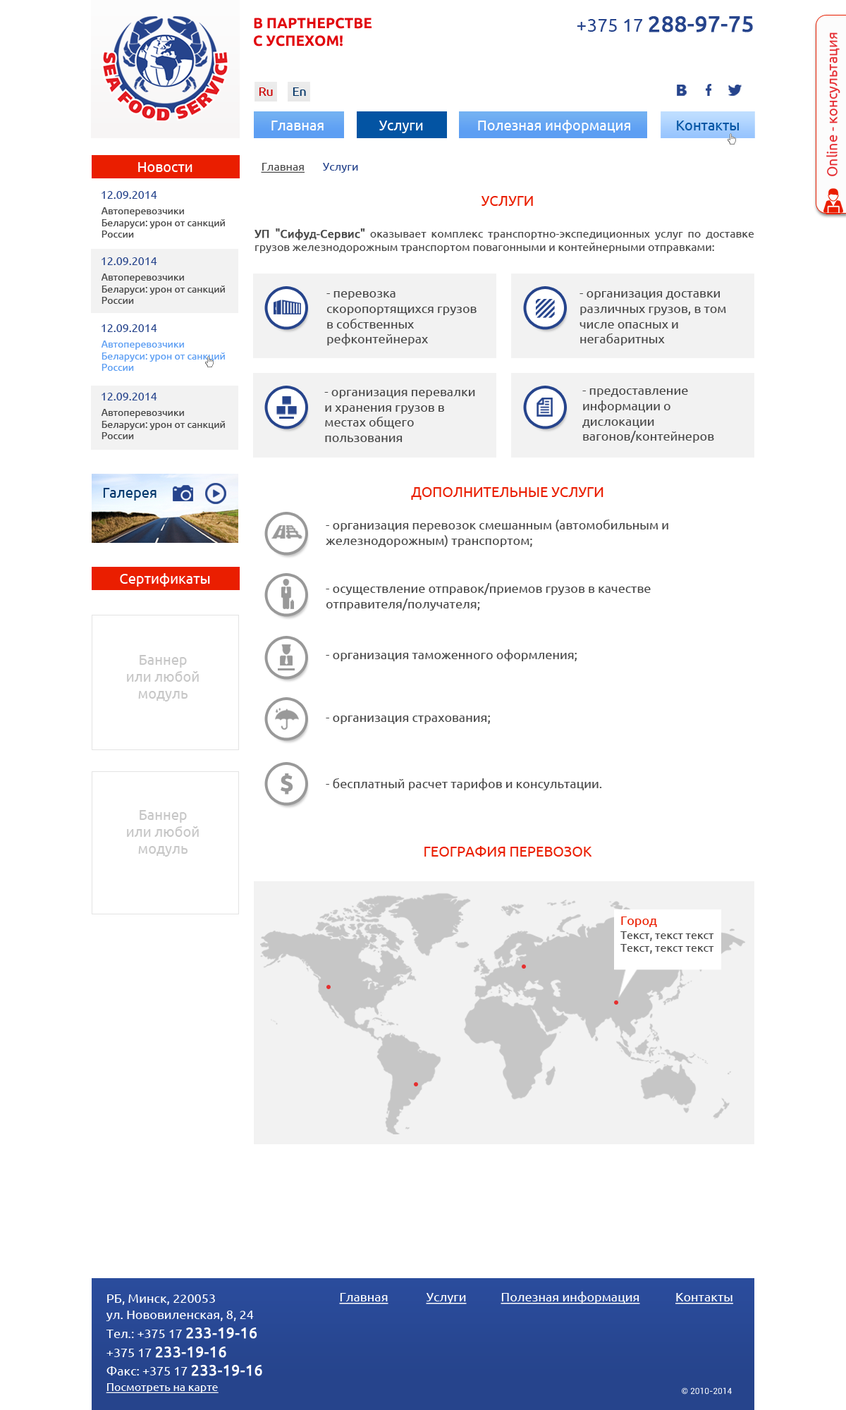
<style>
.page{position:relative;width:846px;height:1410px;background:#ffffff}
.page>*{position:absolute;margin:0}
.t1{font:14.6px "Ubuntu-Bold";color:#e1080e;text-transform:uppercase}
.t2{font:22.2px "Ubuntu";color:#26448c;font-weight:bold}
.t3{font:18.5px "Ubuntu";color:#26448c}
.t4{font:14.1px "Ubuntu";color:#e52b30}
.t5{font:12.3px "Ubuntu";color:#cc0000}
.t6{font:12.3px "Ubuntu";color:#003366}
.t7{font:14.1px "Ubuntu";color:#ffffff}
.t8{font:14.1px "Ubuntu";color:#0354a3}
.t9{font:11.3px "Ubuntu";color:#4a4a4a;text-decoration:underline}
.t10{font:11.3px "Ubuntu";color:#26448c}
.t11{font:14.1px "Ubuntu";color:#ea1e00;text-transform:uppercase}
.t12{font:9.9px "Ubuntu";color:#4a4a4a}
.t13{font:11.3px "Ubuntu";color:#494949}
.t14{font:11.3px "Ubuntu";color:#494949;font-weight:bold}
.t15{font:12.7px "Ubuntu";color:#494949}
.t16{font:9.9px "Ubuntu";color:#5c9ef3}
.t17{font:14.1px "Ubuntu";color:#03386c}
.t18{font:14.1px "Ubuntu";color:#c7c7c7}
.t19{font:23.4px "Ubuntu-Bold";color:#999999;font-weight:bold}
.t20{font:12.7px "Ubuntu";color:#ea1e00}
.t21{font:12.7px "Ubuntu";color:#ffffff}
.t22{font:12.7px "Ubuntu";color:#ffffff;text-decoration:underline}
.t23{font:12.6px "Ubuntu";color:#ffffff}
.t24{font:15.1px "Ubuntu";color:#ffffff;font-weight:bold}
.t25{font:11.3px "Ubuntu";color:#ffffff;text-decoration:underline}
.t26{font:8.5px "Roboto-Regular";color:#ffffff}
</style>
<div class="page">
<p class="t1" style="left:254px;top:18px;width:117px;height:29px">В партнерстве<br>с успехом!</p>
<p class="t2" style="left:577px;top:16px;width:176px;height:16px"><span class="t3">+375 17 </span>288-97-75</p>
<p class="t4" style="left:826px;top:32px;width:14px;height:144px;rotate:-90deg">Online - консультация</p>
<p class="t5" style="left:259px;top:87px;width:14px;height:9px">Ru</p>
<p class="t6" style="left:293px;top:87px;width:13px;height:9px">En</p>
<p class="t7" style="left:271px;top:121px;width:53px;height:9px">Главная</p>
<p class="t7" style="left:379px;top:121px;width:44px;height:12px">Услуги</p>
<p class="t7" style="left:478px;top:120px;width:152px;height:13px">Полезная информация</p>
<p class="t8" style="left:677px;top:121px;width:62px;height:9px">Контакты</p>
<p class="t7" style="left:138px;top:162px;width:54px;height:10px">Новости</p>
<p class="t9" style="left:261px;top:163px;width:97px;height:10px">Главная       <span class="t10">Услуги</span></p>
<p class="t10" style="left:102px;top:191px;width:55px;height:8px">12.09.2014</p>
<p class="t11" style="left:481px;top:196px;width:52px;height:10px">услуги</p>
<p class="t12" style="left:101px;top:207px;width:124px;height:31px">Автоперевозчики Беларуси: урон от санкций России</p>
<p class="t13" style="left:254px;top:228px;width:500px;height:25px;text-align:justify"><span class="t14">УП "Сифуд-Сервис" </span>оказывает комплекс транспортно-экспедиционных услуг по доставке грузов железнодорожным транспортом повагонными и контейнерными отправками:</p>
<p class="t10" style="left:102px;top:257px;width:55px;height:8px">12.09.2014</p>
<p class="t12" style="left:101px;top:273px;width:124px;height:31px">Автоперевозчики Беларуси: урон от санкций России</p>
<p class="t15" style="left:326px;top:291px;width:150px;height:54px">- перевозка скоропортящихся грузов в собственных рефконтейнерах</p>
<p class="t15" style="left:579px;top:291px;width:147px;height:54px">- организация доставки различных грузов, в том числе опасных и негабаритных</p>
<p class="t10" style="left:102px;top:324px;width:55px;height:8px">12.09.2014</p>
<p class="t16" style="left:101px;top:340px;width:124px;height:31px">Автоперевозчики Беларуси: урон от санкций России</p>
<p class="t15" style="left:324px;top:390px;width:151px;height:52px">- организация перевалки и хранения грузов в местах общего пользования</p>
<p class="t15" style="left:582px;top:388px;width:132px;height:55px">- предоставление информации о дислокации вагонов/контейнеров</p>
<p class="t10" style="left:102px;top:393px;width:55px;height:7px">12.09.2014</p>
<p class="t12" style="left:101px;top:409px;width:124px;height:30px">Автоперевозчики Беларуси: урон от санкций России</p>
<p class="t17" style="left:103px;top:488px;width:53px;height:12px">Галерея</p>
<p class="t11" style="left:411px;top:487px;width:192px;height:13px">Дополнительные услуги</p>
<p class="t15" style="left:326px;top:519px;width:342px;height:28px">- организация перевозок смешанным (автомобильным и железнодорожным) транспортом;</p>
<p class="t7" style="left:120px;top:573px;width:90px;height:13px">Сертификаты</p>
<p class="t15" style="left:326px;top:583px;width:325px;height:27px">- осуществление отправок/приемов грузов в качестве отправителя/получателя;</p>
<p class="t15" style="left:326px;top:649px;width:251px;height:12px">- организация таможенного оформления;</p>
<p class="t18" style="left:127px;top:655px;width:72px;height:46px;text-align:center">Баннер<br>или любой<br>модуль</p>
<p class="t15" style="left:326px;top:715px;width:164px;height:9px">- организация страхования;</p>
<p class="t19" style="left:281px;top:773px;width:12px;height:21px">$</p>
<p class="t15" style="left:326px;top:778px;width:276px;height:12px">- бесплатный расчет тарифов и консультации.</p>
<p class="t18" style="left:127px;top:810px;width:72px;height:46px;text-align:center">Баннер<br>или любой<br>модуль</p>
<p class="t11" style="left:424px;top:846px;width:168px;height:10px">География перевозок</p>
<p class="t20" style="left:621px;top:916px;width:36px;height:11px">Город</p>
<p class="t13" style="left:620px;top:931px;width:94px;height:10px">Текст, текст текст</p>
<p class="t13" style="left:620px;top:944px;width:94px;height:10px">Текст, текст текст</p>
<p class="t21" style="left:107px;top:1294px;width:108px;height:11px">РБ, Минск, 220053</p>
<p class="t22" style="left:339px;top:1293px;width:49px;height:11px">Главная</p>
<p class="t22" style="left:426px;top:1293px;width:41px;height:11px">Услуги</p>
<p class="t22" style="left:500px;top:1291px;width:140px;height:13px">Полезная информация</p>
<p class="t22" style="left:675px;top:1293px;width:58px;height:11px">Контакты</p>
<p class="t21" style="left:106px;top:1310px;width:148px;height:11px">ул. Нововиленская, 8, 24</p>
<p class="t23" style="left:106px;top:1327px;width:151px;height:12px">Тел.: +375 17 <span class="t24">233-19-16</span></p>
<p class="t24" style="left:106px;top:1346px;width:120px;height:12px"><span class="t23">+375 17 </span>233-19-16</p>
<p class="t23" style="left:106px;top:1365px;width:156px;height:11px">Факс: +375 17 <span class="t24">233-19-16</span></p>
<p class="t25" style="left:106px;top:1383px;width:113px;height:10px">Посмотреть на карте</p>
<p class="t26" style="left:682px;top:1387px;width:50px;height:7px">© 2010-2014</p>
</div>
